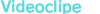
<style>
.page{position:relative;width:100px;height:14px;background:#ffffff}
.page>*{position:absolute;margin:0}
.t1{font:14.8px "RodinProN-DB";color:#59dbdd;font-weight:bold}
</style>
<div class="page">
<p class="t1" style="left:0px;top:0px;width:82px;height:16px">Videoclipe</p>
</div>
